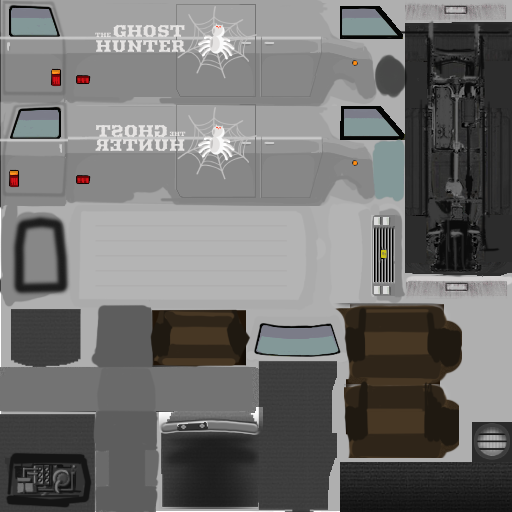
<style>
.page{position:relative;width:512px;height:512px}
.page>*{position:absolute;margin:0}
.t1{font:17.1px/14.2px "Arbutus";color:#e5e3e2}
.t2{font:6.2px "Arbutus";color:#e5e3e2}
</style>
<div class="page">
<p class="t1" style="left:96px;top:24px;width:89px;height:29px;text-align:right">GHOST<br>HUNTER</p>
<p class="t2" style="left:95px;top:32px;width:16px;height:5px">THE</p>
<p class="t1" style="left:95px;top:124px;width:90px;height:28px;text-align:right;rotate:-180deg">GHOST<br>HUNTER</p>
<p class="t2" style="left:169px;top:131px;width:17px;height:5px;rotate:-180deg">THE</p>
</div>
